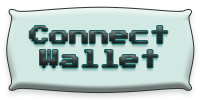
<style>
.page{position:relative;width:200px;height:100px;background:#d2e8e3}
.page>*{position:absolute;margin:0}
.t1{font:20px "PressStart2P-Regular";color:#2c3532}
</style>
<div class="page">
<p class="t1" style="left:29px;top:26px;width:139px;height:42px">Connect<br>Wallet</p>
</div>
